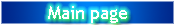
<style>
.page{position:relative;width:175px;height:25px}
.page>*{position:absolute;margin:0}
.t1{font:18px "TrebuchetMS";color:#ffffff}
</style>
<div class="page">
<p class="t1" style="left:48px;top:6px;width:79px;height:17px">Main page</p>
</div>
